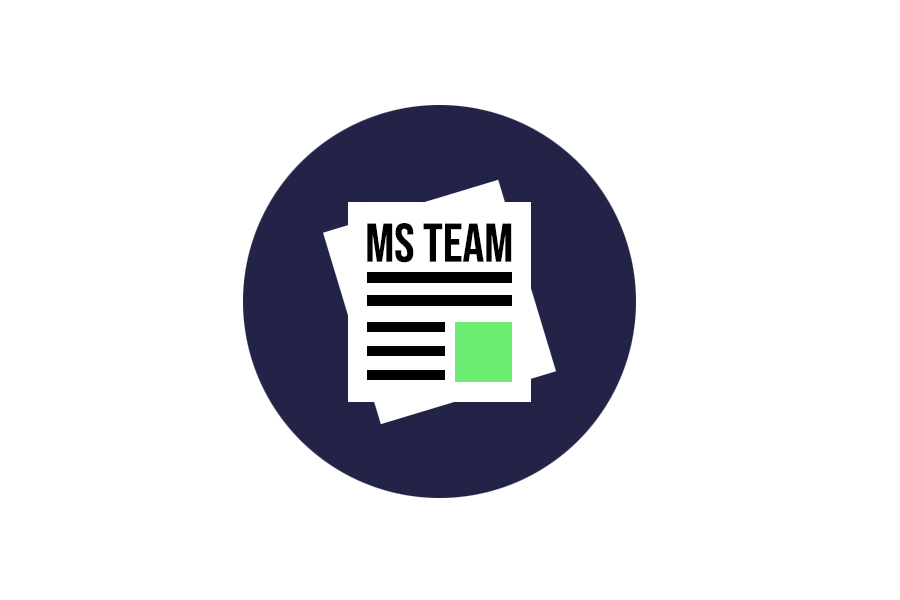
<style>
.page{position:relative;width:900px;height:600px;background:#ffffff}
.page>*{position:absolute;margin:0}
.t1{font:54.2px "BebasNeue-Regular";color:#000000}
</style>
<div class="page">
<p class="t1" style="left:367px;top:223px;width:145px;height:40px">MS TEAM</p>
</div>
